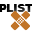
<style>
.page{position:relative;width:32px;height:32px;background:#ffffff}
.page>*{position:absolute;margin:0}
.t1{font:10.5px "Arial-Black";color:#000000}
</style>
<div class="page">
<p class="t1" style="left:0px;top:4px;width:33px;height:8px">PLIST</p>
</div>
